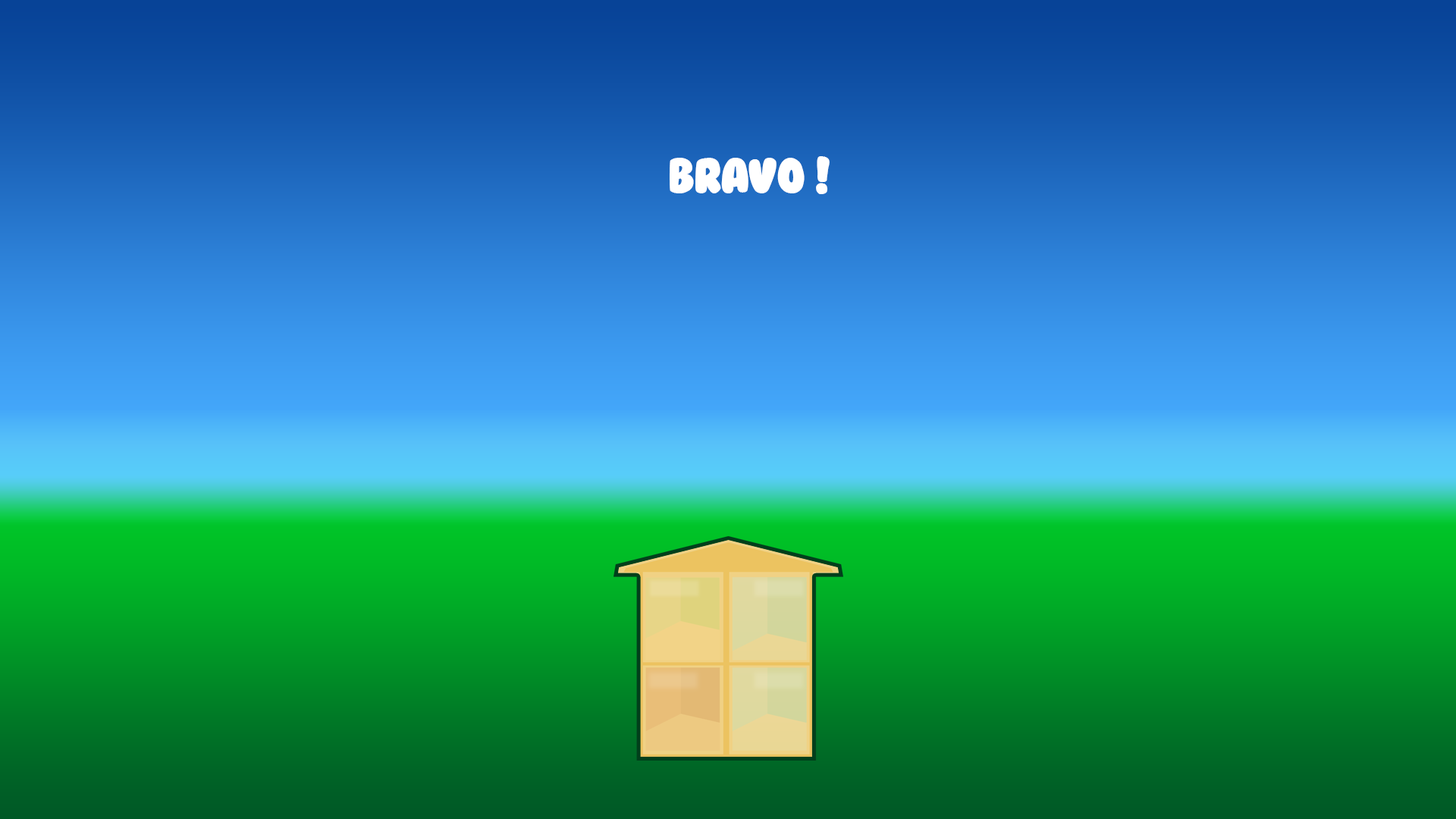
<style>
.page{position:relative;width:1456px;height:819px}
.page>*{position:absolute;margin:0}
.t1{font:45.5px "BubbleGum";letter-spacing:-0.035em;color:#ffffff}
</style>
<div class="page">
<p class="t1" style="left:670px;top:156px;width:160px;height:38px">Bravo !</p>
</div>
